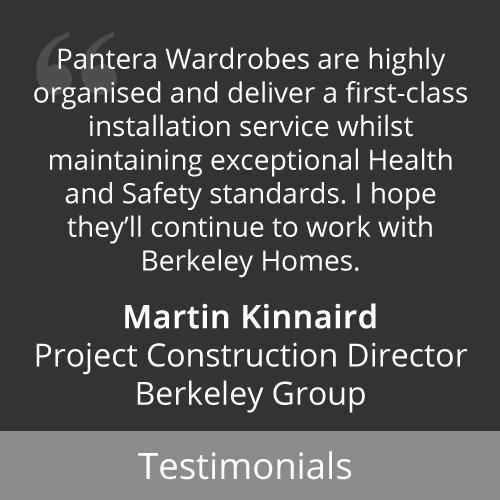
<style>
.page{position:relative;width:500px;height:500px;background:#333333}
.page>*{position:absolute;margin:0}
.t1{font:28px "OpenSans-Regular";color:#ffffff}
.t2{font:32px "OpenSans-SemiBold";color:#ffffff;font-weight:bold}
.t3{font:32px "OpenSans-Regular";color:#ffffff}
.t4{font:36.5px "OpenSans-Regular";color:#ffffff}
</style>
<div class="page">
<p class="t1" style="left:34px;top:47px;width:434px;height:366px;text-align:center">Pantera Wardrobes are highly organised and deliver a first-class installation service whilst maintaining exceptional Health and Safety standards. I hope they’ll continue to work with Berkeley Homes.<br><br><span class="t2">Martin Kinnaird<br></span><span class="t3">Project Construction Director Berkeley Group</span></p>
<p class="t4" style="left:138px;top:451px;width:213px;height:29px">Testimonials</p>
</div>
